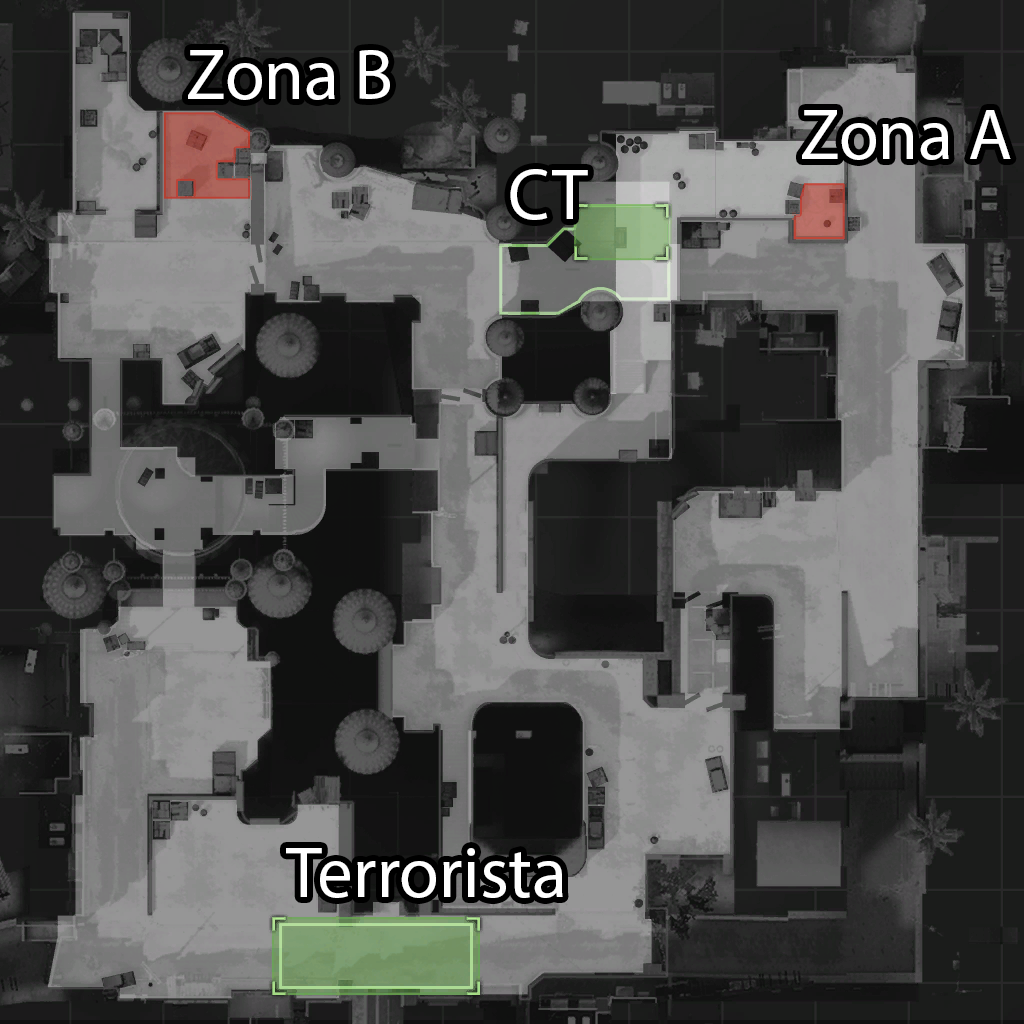
<style>
.page{position:relative;width:1024px;height:1024px}
.page>*{position:absolute;margin:0}
.t1{font:72px "MyriadPro-Regular";color:#ffffff}
</style>
<div class="page">
<p class="t1" style="left:188px;top:50px;width:202px;height:50px">Zona B</p>
<p class="t1" style="left:802px;top:110px;width:209px;height:50px">Zona A</p>
<p class="t1" style="left:510px;top:169px;width:78px;height:51px">CT</p>
<p class="t1" style="left:286px;top:848px;width:277px;height:50px">Terrorista</p>
</div>
